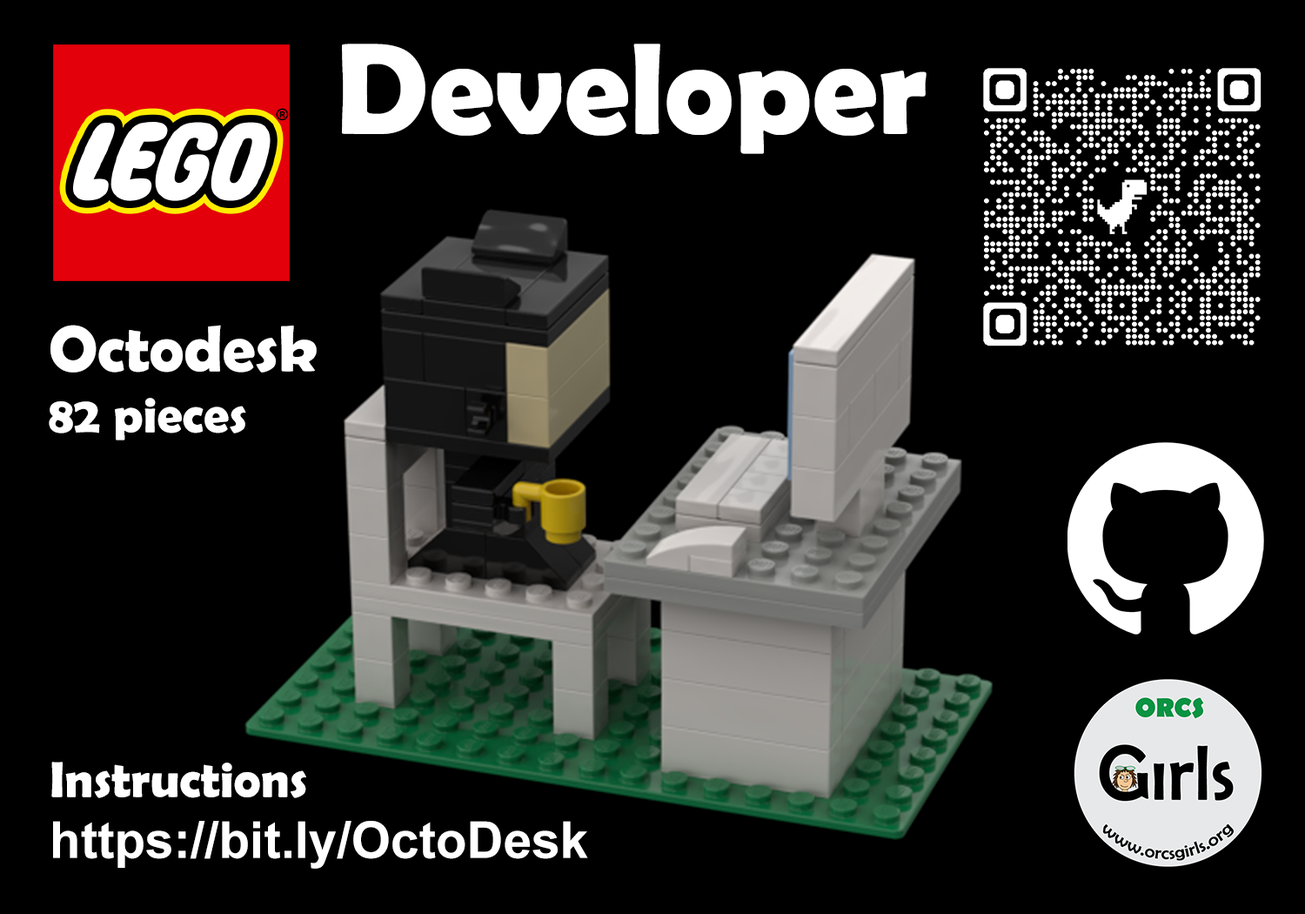
<style>
.page{position:relative;width:1305px;height:914px;background:#000000}
.page>*{position:absolute;margin:0}
.t1{font:130.5px "BerlinSansFBDemi-Bold";color:#ffffff}
.t2{font:50.8px "BerlinSansFBDemi-Bold";color:#ffffff}
.t3{font:65.3px "BerlinSansFBDemi-Bold";color:#ffffff}
.t4{font:50.8px "Arial-BoldMT";color:#ffffff}
</style>
<div class="page">
<p class="t1" style="left:342px;top:44px;width:585px;height:110px">Developer</p>
<p class="t2" style="left:49px;top:325px;width:268px;height:115px"><span class="t3">Octodesk<br></span>82 pieces</p>
<p class="t4" style="left:51px;top:761px;width:537px;height:107px"><span class="t2">Instructions<br></span>https://bit.ly/OctoDesk</p>
</div>
